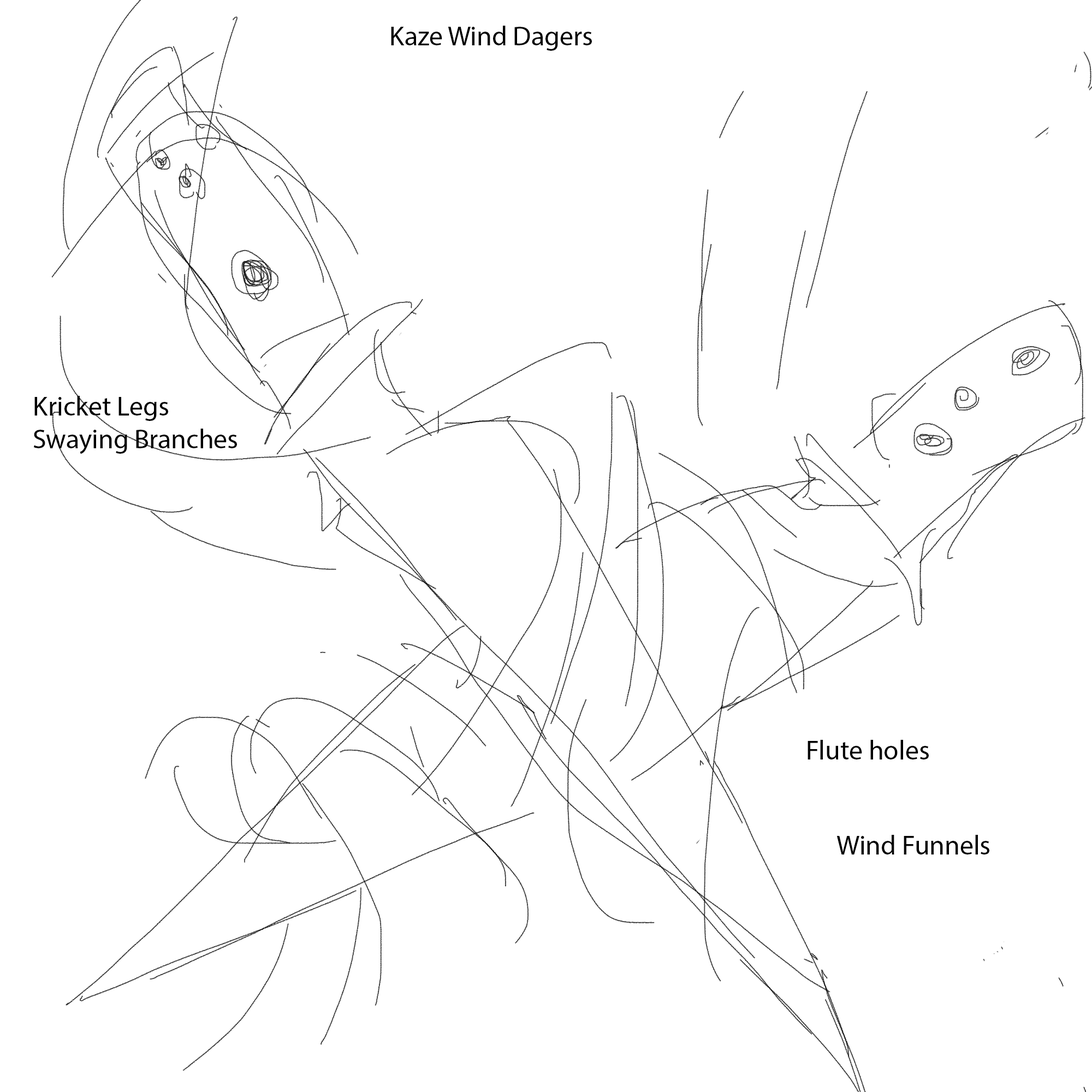
<style>
.page{position:relative;width:1092px;height:1092px;background:#ffffff}
.page>*{position:absolute;margin:0}
.t1{font:27.3px "MyriadPro-Regular";color:#000000}
</style>
<div class="page">
<p class="t1" style="left:391px;top:26px;width:201px;height:25px">Kaze Wind Dagers</p>
<p class="t1" style="left:33px;top:396px;width:204px;height:58px">Kricket Legs <br>Swaying Branches</p>
<p class="t1" style="left:808px;top:740px;width:121px;height:19px">Flute holes</p>
<p class="t1" style="left:836px;top:835px;width:153px;height:19px">Wind Funnels</p>
</div>
